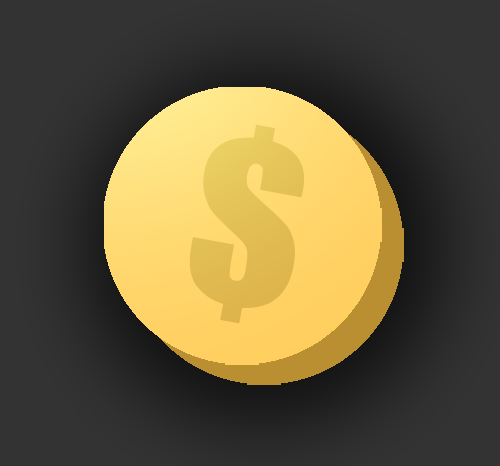
<style>
.page{position:relative;width:500px;height:466px}
.page>*{position:absolute;margin:0}
.t1{font:212px "Impact";color:#e2bf55}
</style>
<div class="page">
<p class="t1" style="left:189px;top:124px;width:116px;height:200px;rotate:10deg">$</p>
</div>
